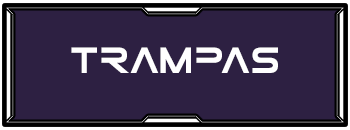
<style>
.page{position:relative;width:350px;height:130px;background:#2d2042}
.page>*{position:absolute;margin:0}
.t1{font:34.7px "ElementalEnd";color:#ffffff;text-transform:uppercase}
</style>
<div class="page">
<p class="t1" style="left:71px;top:47px;width:207px;height:26px">Trampas</p>
</div>
